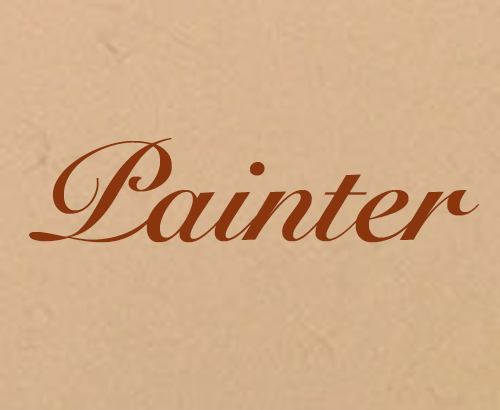
<style>
.page{position:relative;width:500px;height:410px}
.page>*{position:absolute;margin:0}
.t1{font:135.8px "SnellRoundhand-Bold";color:#89350d}
</style>
<div class="page">
<p class="t1" style="left:29px;top:138px;width:450px;height:105px">Painter</p>
</div>
